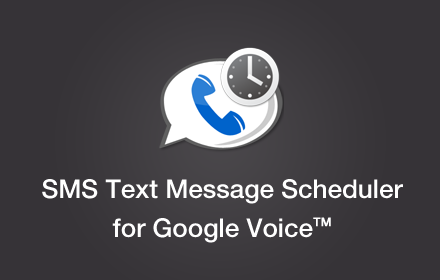
<style>
.page{position:relative;width:440px;height:280px;background:#363337}
.page>*{position:absolute;margin:0}
.t1{font:26px/39px "HelveticaNeueLTPro-Md";color:#ffffff}
.t2{font:12px/39px "HelveticaNeueLTPro-Md";color:#ffffff;font-weight:bold}
</style>
<div class="page">
<p class="t1" style="left:42px;top:179px;width:361px;height:64px;text-align:center">SMS Text Message Scheduler<br>for Google Voice<span class="t2">TM</span></p>
</div>
